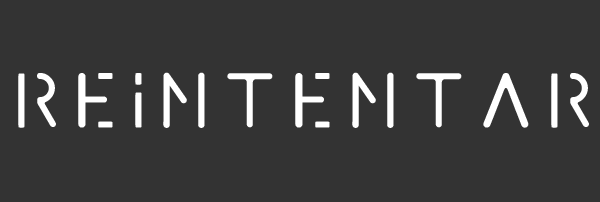
<style>
.page{position:relative;width:600px;height:202px;background:#333333}
.page>*{position:absolute;margin:0}
.t1{font:75.8px "Avayx";color:#ffffff}
</style>
<div class="page">
<p class="t1" style="left:18px;top:72px;width:571px;height:56px">REIntentar</p>
</div>
